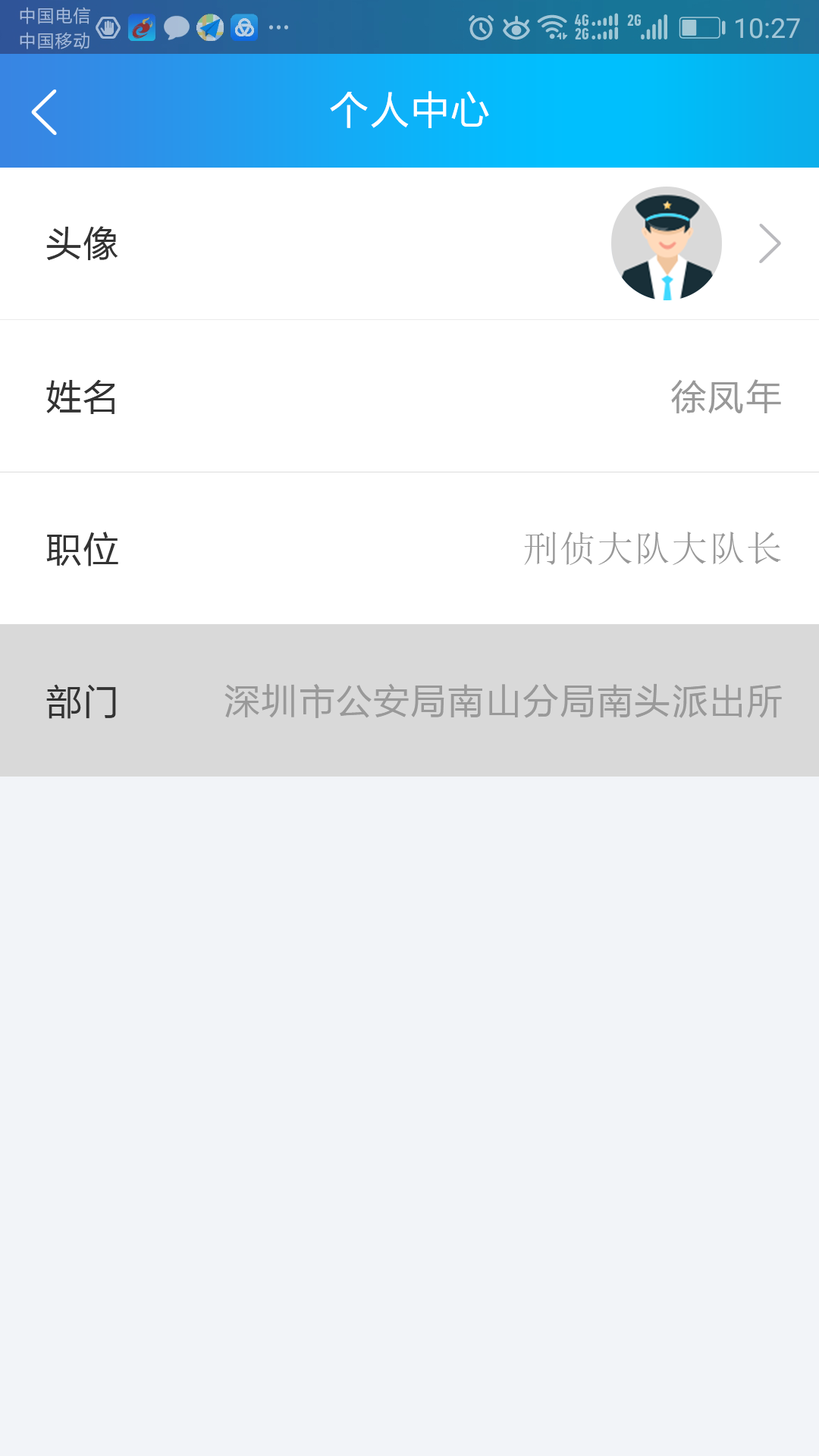
<style>
.page{position:relative;width:819px;height:1456px;background:#f2f4f8}
.page>*{position:absolute;margin:0}
.t1{font:39.4px "FZLTHK--GBK1-0";letter-spacing:0.025em;color:#ffffff}
.t2{font:36.4px "FZLTHK--GBK1-0";letter-spacing:0.025em;color:#333333}
.t3{font:36.4px "FZLTHK--GBK1-0";letter-spacing:0.025em;color:#999999}
.t4{font:36.4px "SimSun";letter-spacing:0.025em;color:#999999}
</style>
<div class="page">
<p class="t1" style="left:330px;top:91px;width:159px;height:37px">个人中心</p>
<p class="t2" style="left:46px;top:226px;width:72px;height:35px">头像</p>
<p class="t2" style="left:46px;top:379px;width:69px;height:35px">姓名</p>
<p class="t3" style="left:671px;top:379px;width:110px;height:35px">徐凤年</p>
<p class="t2" style="left:46px;top:532px;width:72px;height:34px">职位</p>
<p class="t4" style="left:524px;top:532px;width:257px;height:33px">刑侦大队大队长</p>
<p class="t2" style="left:46px;top:684px;width:70px;height:35px">部门</p>
<p class="t3" style="left:224px;top:683px;width:558px;height:35px">深圳市公安局南山分局南头派出所</p>
</div>
